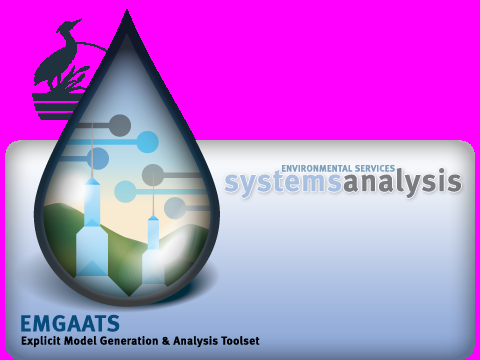
<style>
.page{position:relative;width:480px;height:360px;background:#ff00ff}
.page>*{position:absolute;margin:0}
.t1{font:31.2px "MetaBold-Roman";letter-spacing:0.04em}
.t2{font:9.1px "MetaBold-Roman";letter-spacing:0.04em;color:#7ea1bc}
.t3{font:22.9px "MetaBold-Roman";letter-spacing:0.04em;color:#084b7d}
.t4{font:11.5px "MetaBold-Roman";letter-spacing:0.04em;color:#000000}
</style>
<div class="page">
<p class="t1" style="left:224px;top:167px;width:237px;height:32px">systemsanalysis</p>
<p class="t2" style="left:282px;top:164px;width:113px;height:8px">ENVIRONMENTAL SERVICES</p>
<p class="t3" style="left:21px;top:314px;width:99px;height:18px">EMGAATS</p>
<p class="t4" style="left:21px;top:336px;width:239px;height:12px">Explicit Model Generation &amp; Analysis Toolset</p>
</div>
